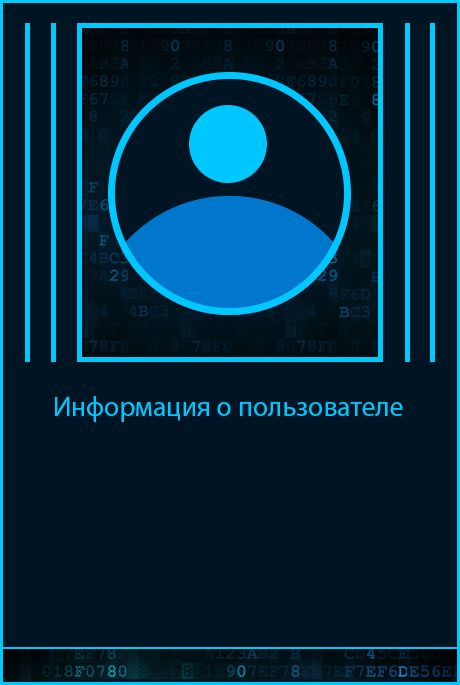
<style>
.page{position:relative;width:460px;height:685px;background:#001523}
.page>*{position:absolute;margin:0}
.t1{font:27.8px "MyriadPro-Regular";color:#00c7ff}
</style>
<div class="page">
<p class="t1" style="left:55px;top:396px;width:348px;height:26px">Информация о пользователе</p>
</div>
